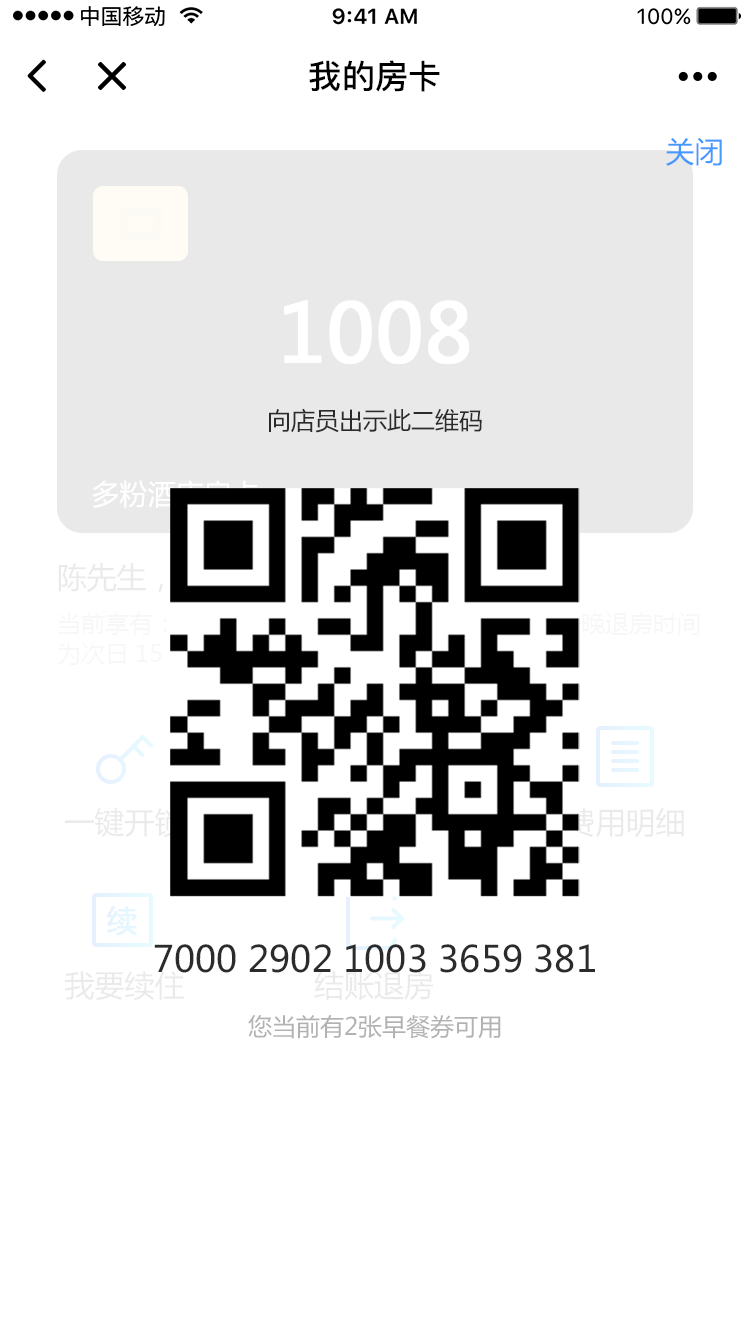
<style>
.page{position:relative;width:750px;height:1334px;background:#ffffff}
.page>*{position:absolute;margin:0}
.t1{font:33.2px "PingFang-SC-Bold";color:#000000}
.t2{font:29px "MicrosoftYaHei";color:#4499ff}
.t3{font:80px "MicrosoftYaHei";color:#ffffff;font-weight:bold}
.t4{font:24px "MicrosoftYaHei";color:#2b2b2b}
.t5{font:36px "MicrosoftYaHei";color:#2b2b2b}
.t6{font:30px "MicrosoftYaHei";color:#eaeaea}
.t7{font:24px "MicrosoftYaHei";color:#b2b2b2}
</style>
<div class="page">
<p class="t1" style="left:309px;top:60px;width:131px;height:32px">我的房卡</p>
<p class="t2" style="left:666px;top:138px;width:56px;height:28px">关闭</p>
<p class="t3" style="left:284px;top:300px;width:186px;height:64px">1008</p>
<p class="t4" style="left:269px;top:408px;width:213px;height:25px">向店员出示此二维码</p>
<p class="t5" style="left:154px;top:944px;width:441px;height:29px">7000 2902 1003 3659 381</p>
<p class="t6" style="left:64px;top:971px;width:120px;height:30px">我要续住</p>
<p class="t7" style="left:248px;top:1015px;width:253px;height:24px">您当前有2张早餐券可用</p>
</div>
